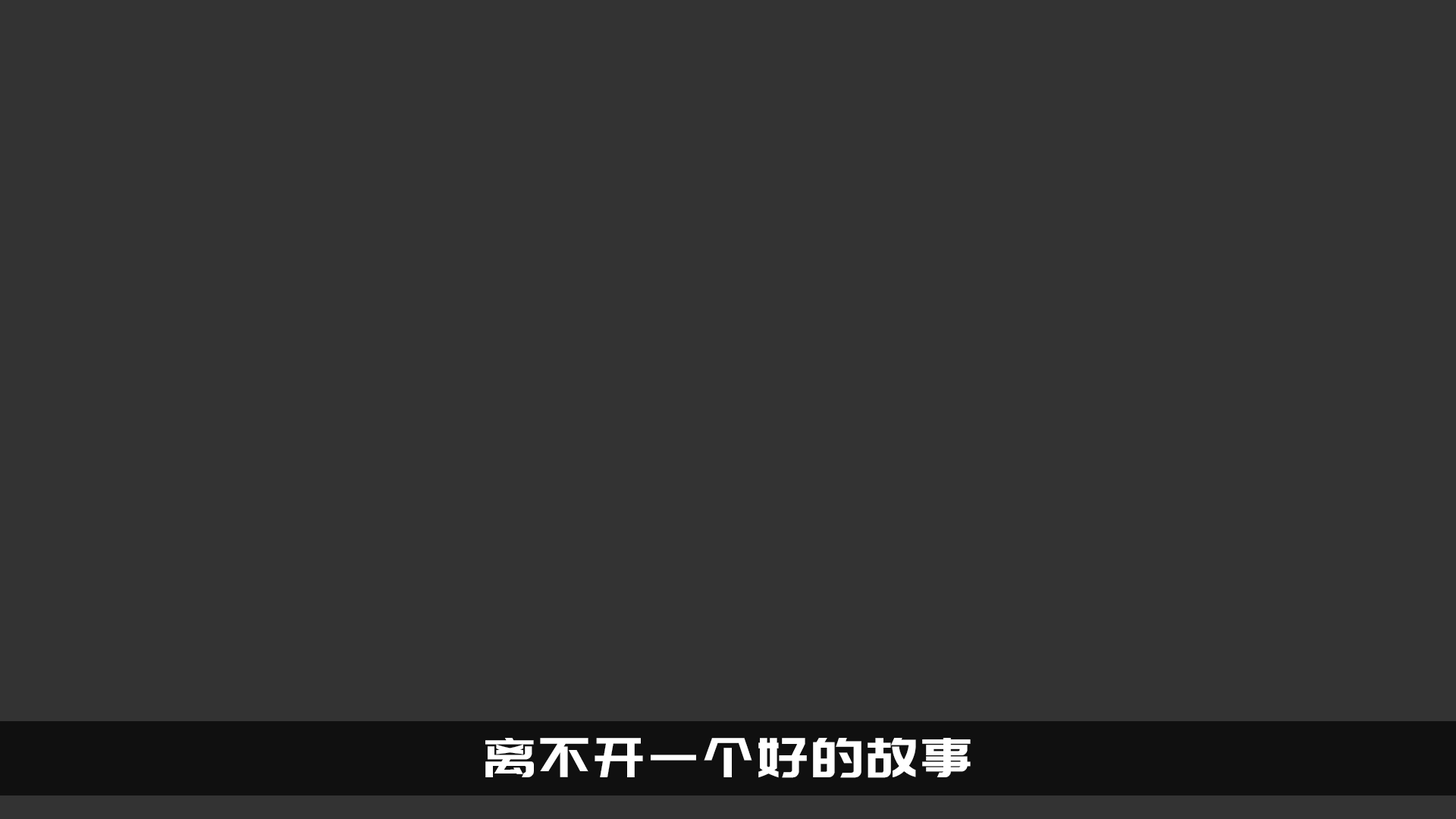
<style>
.page{position:relative;width:1456px;height:819px;background:#333333}
.page>*{position:absolute;margin:0}
.t1{font:54.6px "PangMenZhengDao-3";color:#ffffff}
</style>
<div class="page">
<p class="t1" style="left:485px;top:738px;width:486px;height:40px">离不开一个好的故事</p>
</div>
